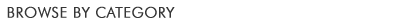
<style>
.page{position:relative;width:400px;height:24px;background:#ffffff}
.page>*{position:absolute;margin:0}
.t1{font:14.7px "FuturaBT-Light";letter-spacing:0.025em;color:#363636;text-transform:uppercase;font-weight:bold}
</style>
<div class="page">
<p class="t1" style="left:7px;top:6px;width:168px;height:12px">BROWSE BY CATEGORY</p>
</div>
